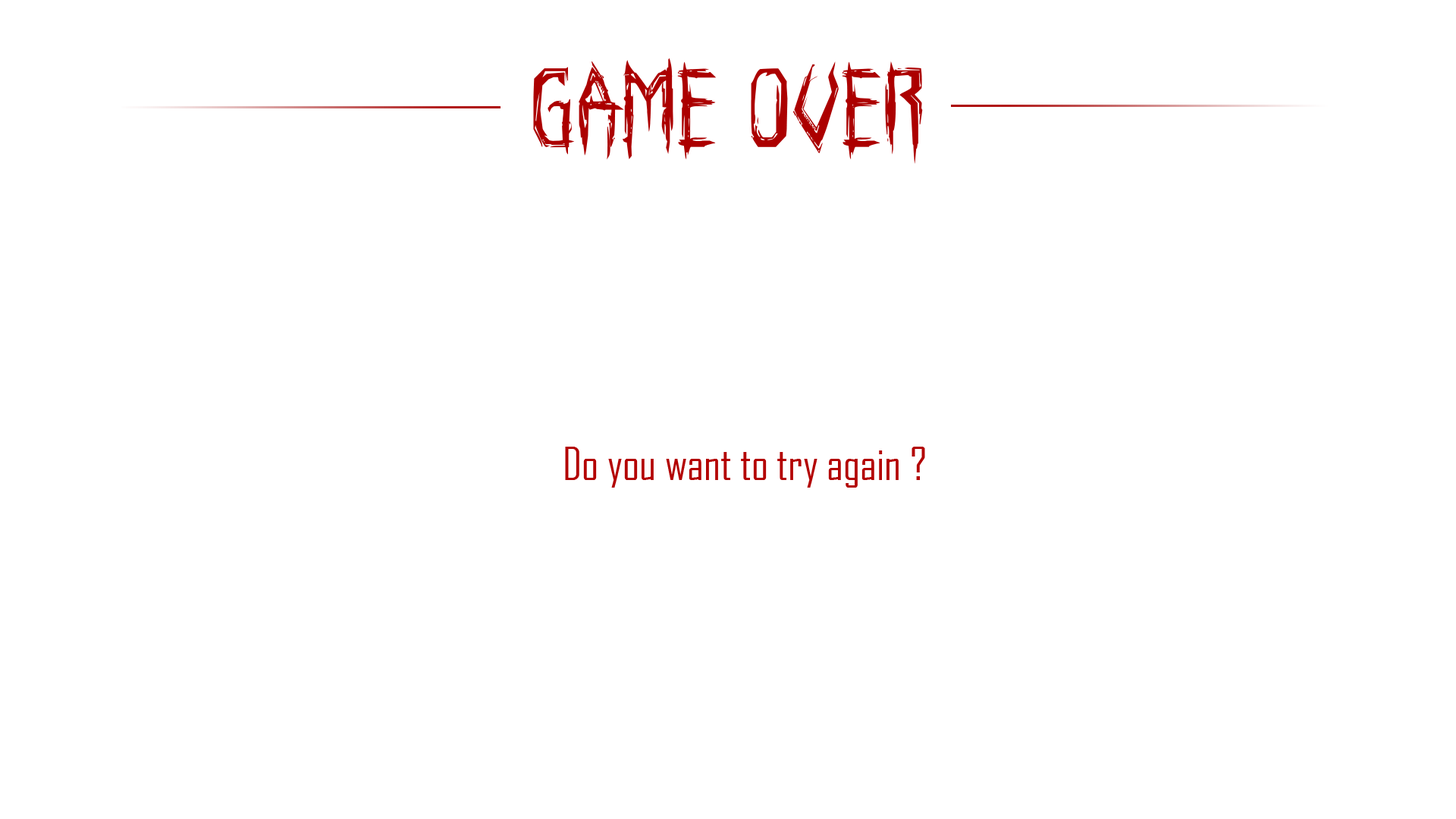
<style>
.page{position:relative;width:1456px;height:819px;background:#ffffff}
.page>*{position:absolute;margin:0}
.t1{font:113.7px "Horroroid";color:#ac0000}
.t2{font:44.2px "AgencyFB-Reg";color:#b30000}
</style>
<div class="page">
<p class="t1" style="left:533px;top:58px;width:390px;height:106px">Game Over</p>
<p class="t2" style="left:565px;top:447px;width:360px;height:41px">Do you want to try again ?</p>
</div>
